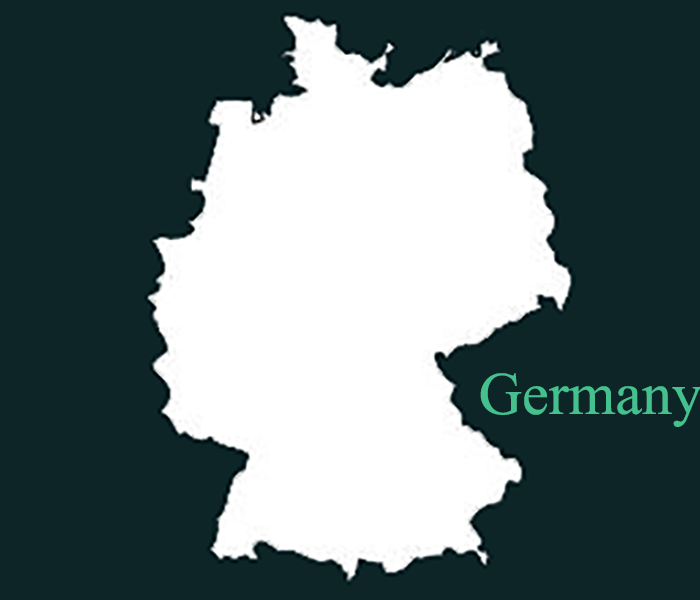
<style>
.page{position:relative;width:700px;height:600px;background:#0e2528}
.page>*{position:absolute;margin:0}
.t1{font:60px "TimesNewRomanPSMT";color:#45c18f}
</style>
<div class="page">
<p class="t1" style="left:480px;top:373px;width:222px;height:54px">Germany</p>
</div>
